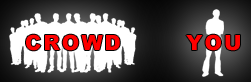
<style>
.page{position:relative;width:251px;height:82px}
.page>*{position:absolute;margin:0}
.t1{font:36px "Arial-Black";letter-spacing:0.1em;color:#ff0000}
</style>
<div class="page">
<p class="t1" style="left:26px;top:34px;width:94px;height:17px">CROWD</p>
<p class="t1" style="left:186px;top:34px;width:54px;height:17px">YOU</p>
</div>
